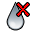
<style>
.page{position:relative;width:32px;height:32px;background:#ffffff}
.page>*{position:absolute;margin:0}
.t1{font:26.8px "Skia-Regular";color:#ff0000}
</style>
<div class="page">
<p class="t1" style="left:17px;top:3px;width:12px;height:13px">x</p>
</div>
